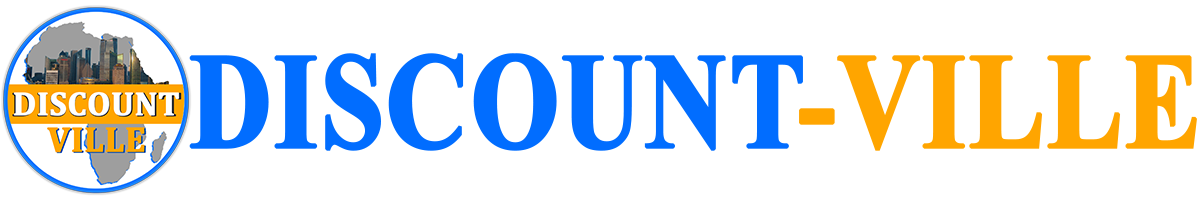
<style>
.page{position:relative;width:1200px;height:200px;background:#ffffff}
.page>*{position:absolute;margin:0}
.t1{font:135px "TimesNewRomanPS-BoldMT";color:#016dff;font-weight:bold;scale:0.83 1}
.t2{font:135px "TimesNewRomanPS-BoldMT";color:#ffa500;font-weight:bold;scale:0.83 1}
</style>
<div class="page">
<p class="t1" style="left:189px;top:53px;width:1008px;height:98px">DISCOUNT<span class="t2">-VILLE</span></p>
</div>
